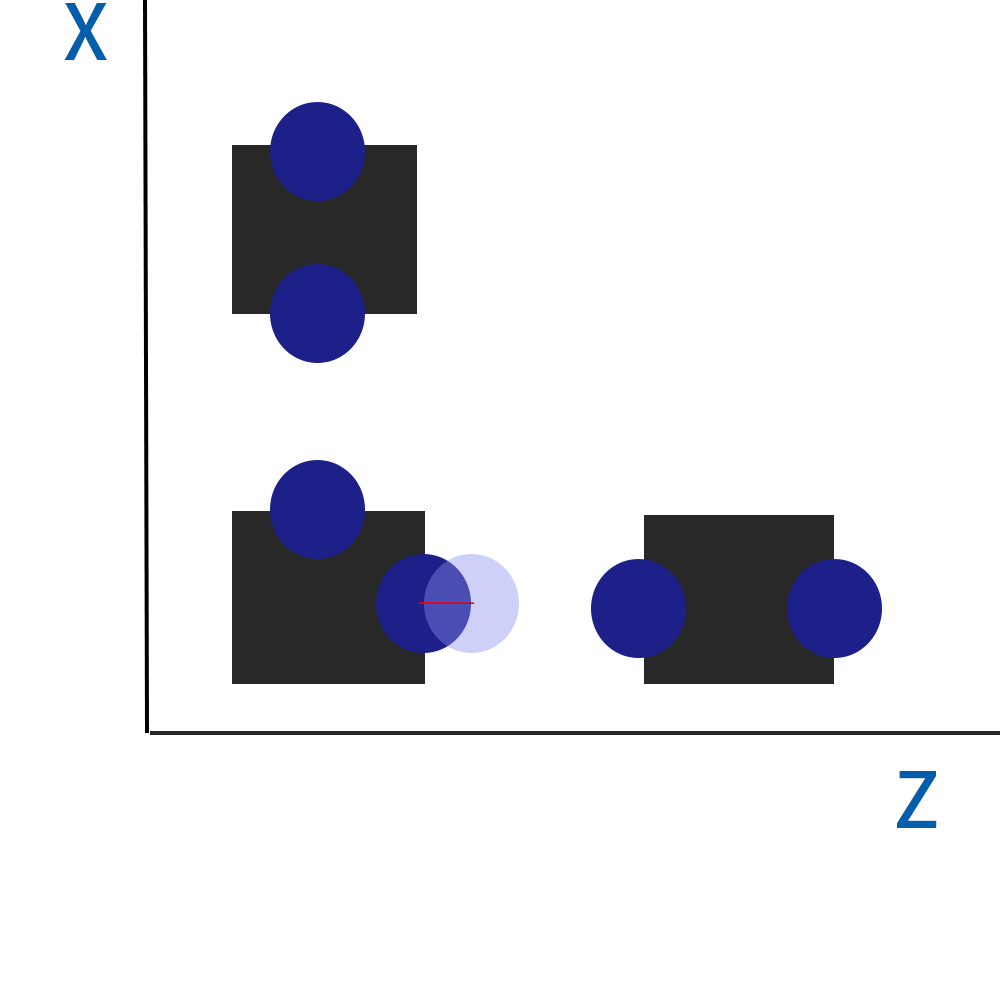
<style>
.page{position:relative;width:1000px;height:1000px;background:#ffffff}
.page>*{position:absolute;margin:0}
.t1{font:75px "AdobeHeitiStd-Regular";letter-spacing:0.1em;color:#015eac}
</style>
<div class="page">
<p class="t1" style="left:64px;top:3px;width:43px;height:57px">X</p>
<p class="t1" style="left:897px;top:771px;width:40px;height:57px">Z</p>
</div>
